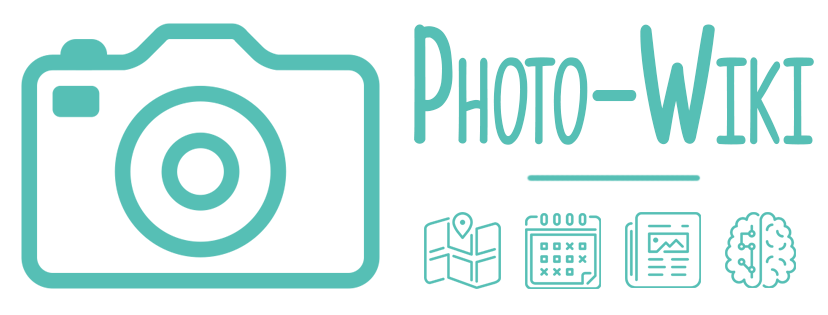
<style>
.page{position:relative;width:828px;height:315px;background:#ffffff}
.page>*{position:absolute;margin:0}
.t1{font:150px "Photographs";color:#56bfb5}
</style>
<div class="page">
<p class="t1" style="left:414px;top:24px;width:400px;height:121px">Photo-Wiki</p>
</div>
